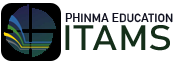
<style>
.page{position:relative;width:180px;height:62px;background:#ffffff}
.page>*{position:absolute;margin:0}
.t1{font:11.8px "Bahnschrift";color:#0f101f}
.t2{font:35.1px "Bahnschrift";color:#142e19;scale:1.12 1}
</style>
<div class="page">
<p class="t1" style="left:65px;top:13px;width:108px;height:10px">PHINMA EDUCATION</p>
<p class="t2" style="left:65px;top:25px;width:105px;height:26px">ITAMS</p>
</div>
